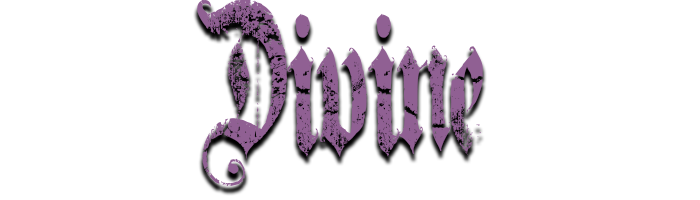
<style>
.page{position:relative;width:700px;height:200px;background:#ffffff}
.page>*{position:absolute;margin:0}
.t1{font:200px "AGothiqueTime";color:#906093}
</style>
<div class="page">
<p class="t1" style="left:197px;top:0px;width:286px;height:186px">Divine</p>
</div>
